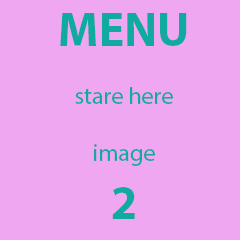
<style>
.page{position:relative;width:240px;height:240px;background:#f0a7f2}
.page>*{position:absolute;margin:0}
.t1{font:24px "MyriadPro-Regular";color:#11aaa1}
.t2{font:48px "MyriadPro-Bold";color:#11aaa1}
</style>
<div class="page">
<p class="t1" style="left:60px;top:13px;width:127px;height:206px;text-align:center"><span class="t2">MENU<br></span><br>stare here<br><br>image <br><span class="t2">2</span></p>
</div>
